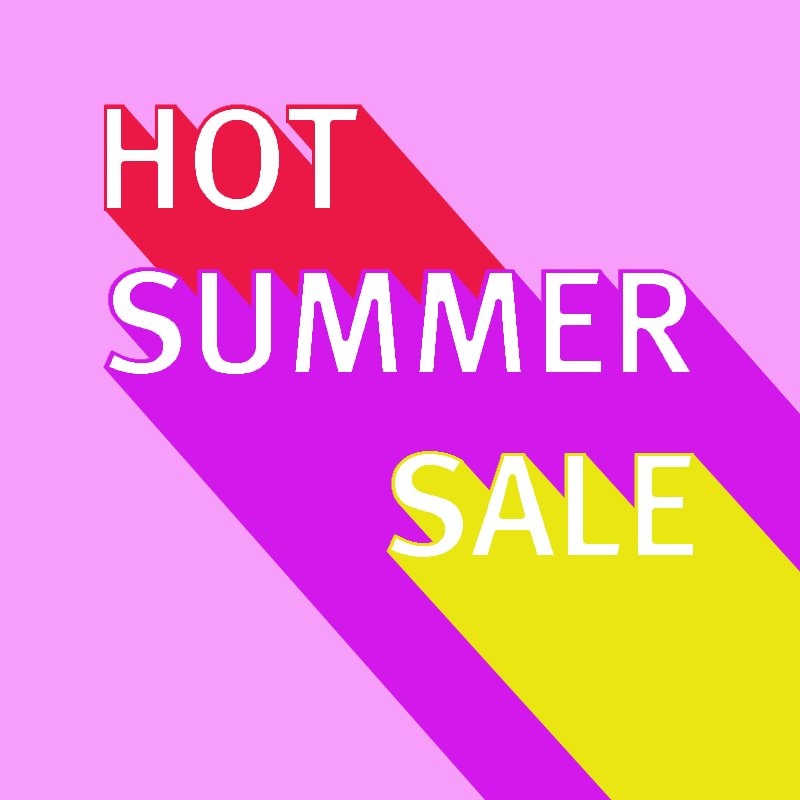
<style>
.page{position:relative;width:800px;height:800px;background:#f69ef9}
.page>*{position:absolute;margin:0}
.t1{font:150px "MetaPlusBold-Roman";letter-spacing:-0.02em;color:#ffffff}
</style>
<div class="page">
<p class="t1" style="left:104px;top:106px;width:257px;height:107px">HOT</p>
<p class="t1" style="left:105px;top:268px;width:590px;height:109px">SUMMER</p>
<p class="t1" style="left:387px;top:451px;width:309px;height:109px">SALE</p>
</div>
